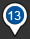
<style>
.page{position:relative;width:30px;height:39px;background:#333333}
.page>*{position:absolute;margin:0}
.t1{font:12px "ArialMT";color:#ffffff}
</style>
<div class="page">
<p class="t1" style="left:8px;top:11px;width:13px;height:9px">13</p>
</div>
